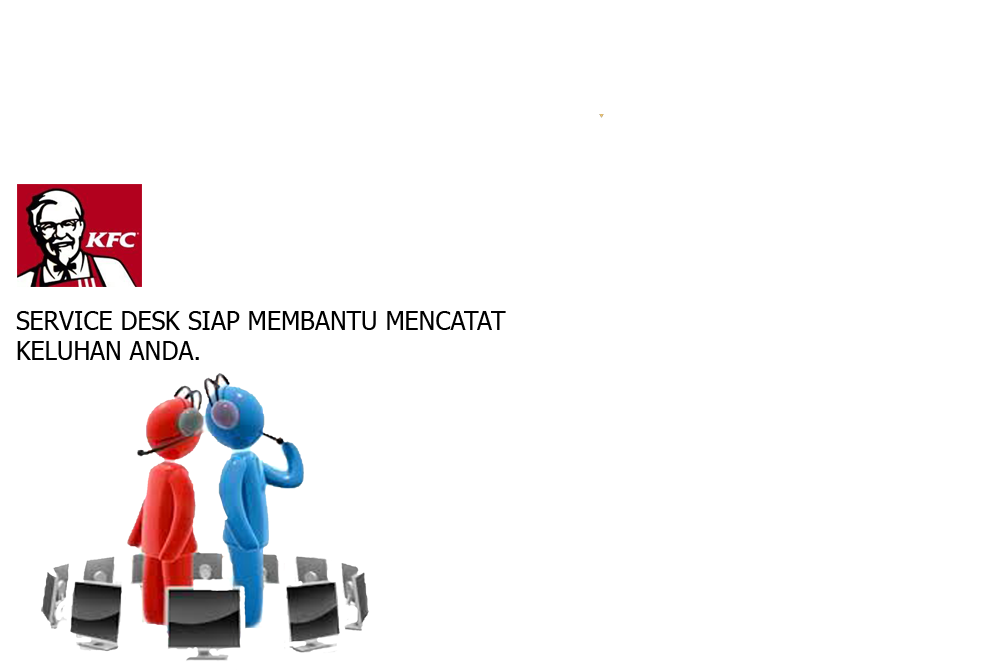
<style>
.page{position:relative;width:990px;height:670px;background:#ffffff}
.page>*{position:absolute;margin:0}
.t1{font:25px "Tahoma";color:#000000}
</style>
<div class="page">
<p class="t1" style="left:16px;top:311px;width:490px;height:49px">SERVICE DESK SIAP MEMBANTU MENCATAT<br>KELUHAN ANDA.</p>
</div>
